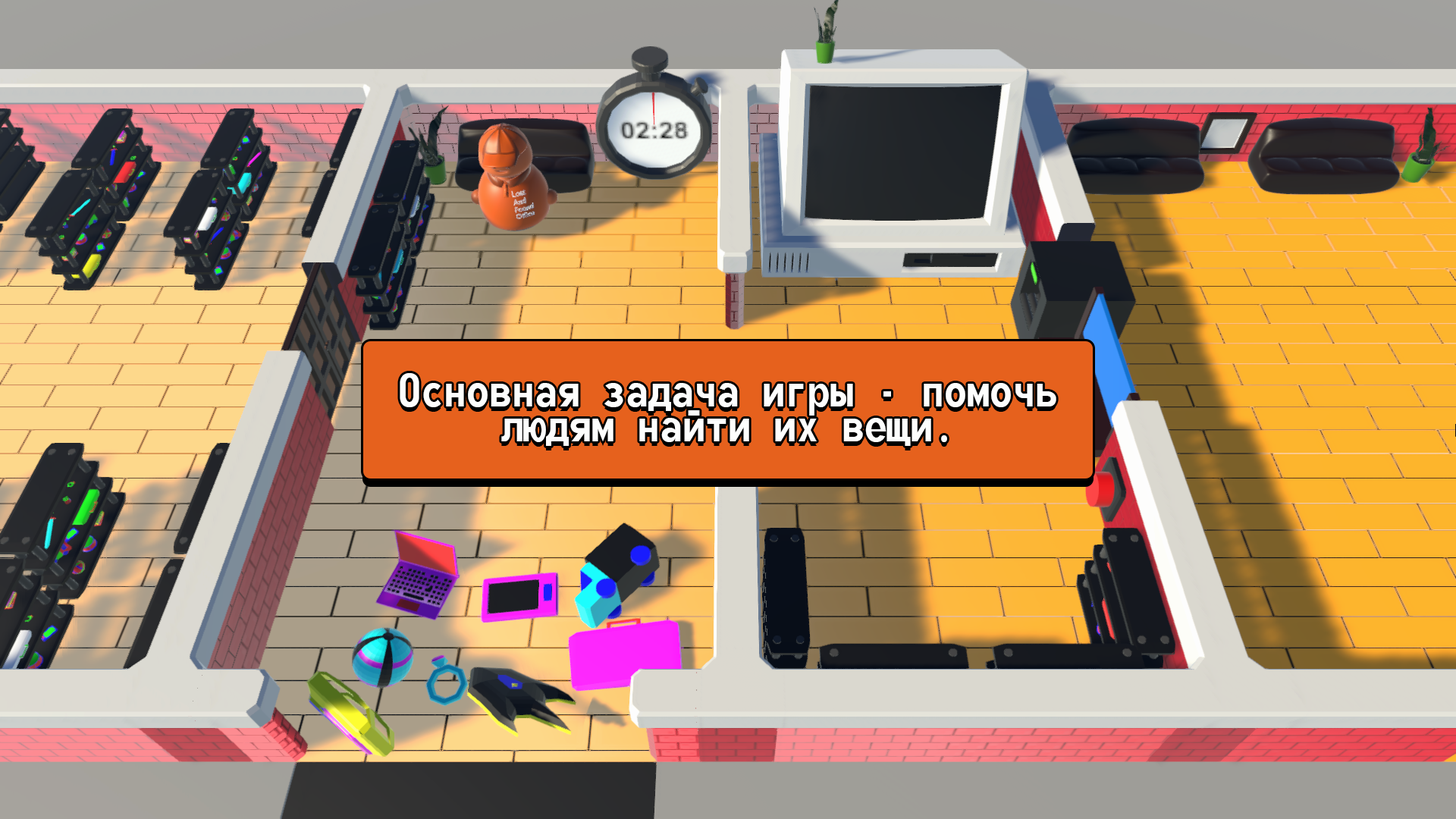
<style>
.page{position:relative;width:1456px;height:819px}
.page>*{position:absolute;margin:0}
.t1{font:56.9px/34.8px "MonofontoRUSBYMelman-Regular";color:#fdfefd}
</style>
<div class="page">
<p class="t1" style="left:400px;top:373px;width:656px;height:73px;text-align:center">Основная задача игры - помочь<br>людям найти их вещи.</p>
</div>
